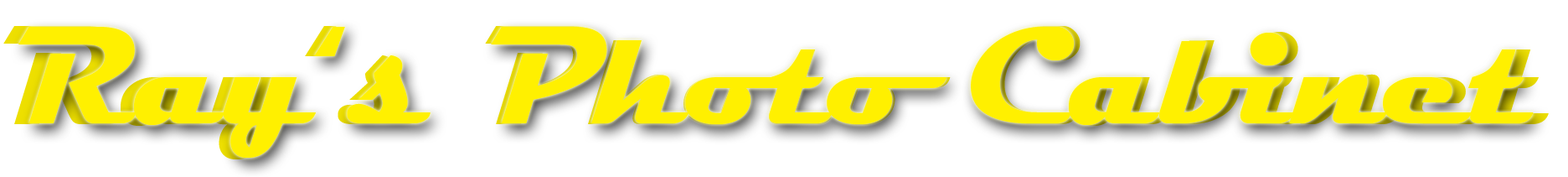
<style>
.page{position:relative;width:1568px;height:177px;background:#ffffff}
.page>*{position:absolute;margin:0}
.t1{font:142.8px "Magneto-Bold";color:#eddf00}
.t2{font:139.9px "Magneto-Bold";color:#fff000}
</style>
<div class="page">
<p class="t1" style="left:3px;top:26px;width:1546px;height:133px">Ray‘s Photo Cabinet</p>
<p class="t2" style="left:18px;top:27px;width:1516px;height:130px">Ray‘s Photo Cabinet</p>
</div>
